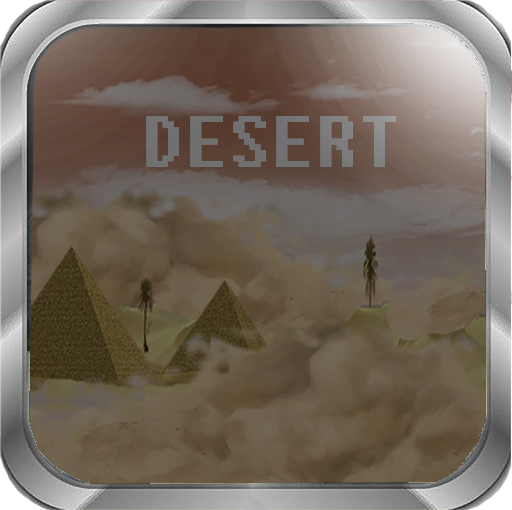
<style>
.page{position:relative;width:512px;height:510px}
.page>*{position:absolute;margin:0}
.t1{font:72.4px "Fixedsys";color:#717171;scale:0.96 1}
</style>
<div class="page">
<p class="t1" style="left:146px;top:116px;width:250px;height:51px">DESERT</p>
<p class="t1" style="left:146px;top:116px;width:250px;height:51px">DESERT</p>
<p class="t1" style="left:146px;top:116px;width:250px;height:51px">DESERT</p>
</div>
